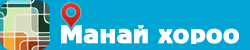
<style>
.page{position:relative;width:250px;height:50px;background:#00a5d3}
.page>*{position:absolute;margin:0}
.t1{font:24px "MonFnt21";color:#ffffff;font-weight:bold}
</style>
<div class="page">
<p class="t1" style="left:61px;top:25px;width:178px;height:19px">Ìàíàé õîðîî</p>
</div>
